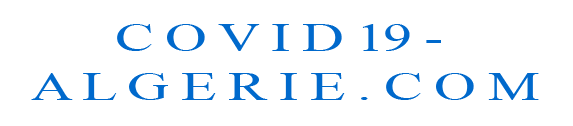
<style>
.page{position:relative;width:573px;height:126px;background:#ffffff}
.page>*{position:absolute;margin:0}
.t1{font:40.2px "TimesNewRomanPSMT";letter-spacing:-0.025em;color:#0069cc;scale:1.45 1}
</style>
<div class="page">
<p class="t1" style="left:31px;top:24px;width:508px;height:76px;text-align:center">C O V I D 19 - <br>A L G E R I E . C O M</p>
</div>
